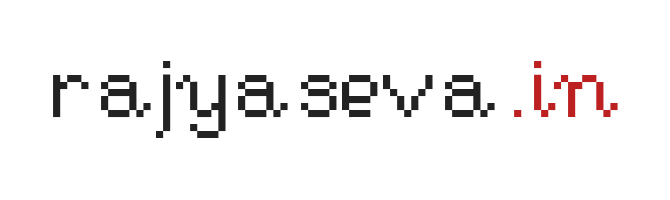
<style>
.page{position:relative;width:670px;height:200px;background:#ffffff}
.page>*{position:absolute;margin:0}
.t1{font:112.5px "RSEHandwritingPi";letter-spacing:-0.01em;color:#222222}
.t2{font:112.5px "RSEHandwritingPi";letter-spacing:-0.01em;color:#bc2020}
</style>
<div class="page">
<p class="t1" style="left:53px;top:61px;width:565px;height:77px">rajyaseva<span class="t2">.in</span></p>
</div>
